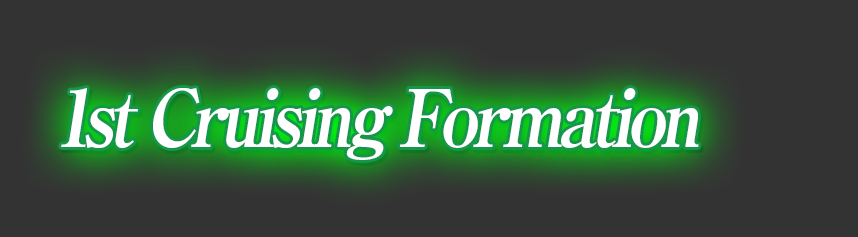
<style>
.page{position:relative;width:858px;height:237px;background:#333333}
.page>*{position:absolute;margin:0}
.t1{font:80px "RyuminPro-ExBold";letter-spacing:-0.08em;color:#ffffff;font-style:italic;scale:0.9 1}
</style>
<div class="page">
<p class="t1" style="left:61px;top:88px;width:638px;height:72px">1st Cruising Formation</p>
</div>
